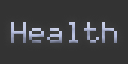
<style>
.page{position:relative;width:128px;height:64px;background:#333333}
.page>*{position:absolute;margin:0}
.t1{font:48px "Coder's-Crux"}
</style>
<div class="page">
<p class="t1" style="left:11px;top:22px;width:106px;height:21px">Health</p>
</div>
